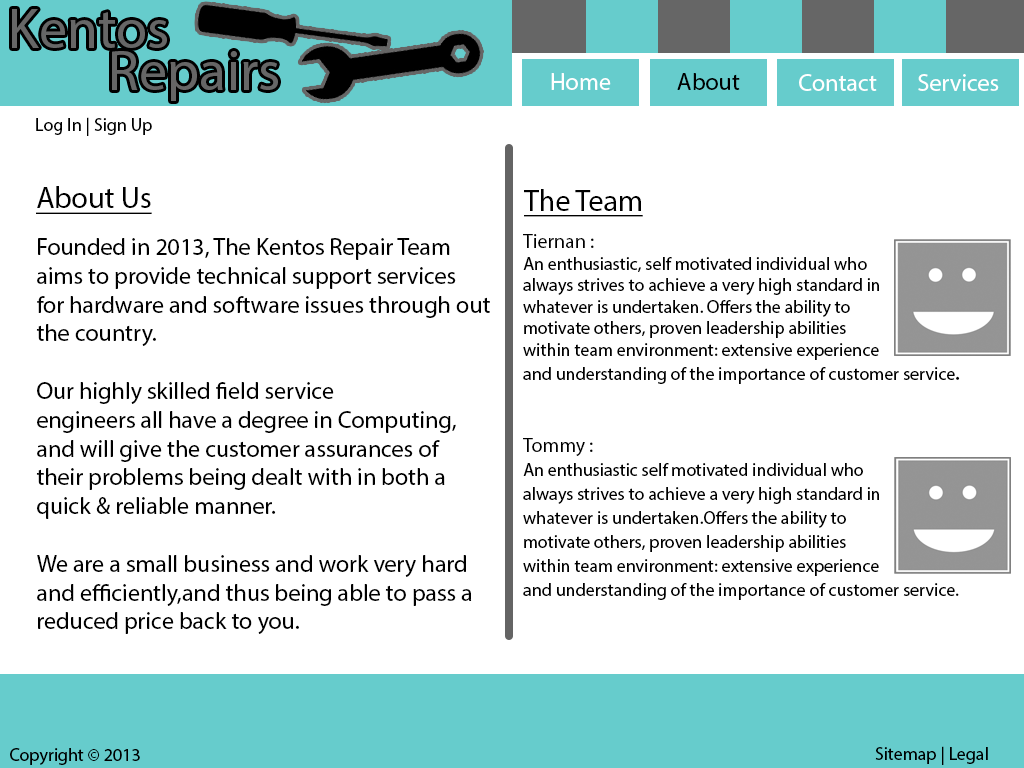
<style>
.page{position:relative;width:1024px;height:768px;background:#ffffff}
.page>*{position:absolute;margin:0}
.t1{font:24px "MyriadPro-Regular";color:#ffffff}
.t2{font:24px "MyriadPro-Regular";color:#000000}
.t3{font:18px "MyriadPro-Regular";color:#000000}
.t4{font:30px "MyriadPro-Regular";color:#000000;text-decoration:underline}
.t5{font:18px/24px "MyriadPro-Regular";color:#000000}
.t6{font:20px "MyriadPro-Regular";color:#000000}
.t7{font:24px/24px "MyriadPro-Regular";color:#000000}
.t8{font:20px/24px "MyriadPro-Regular";color:#000000}
</style>
<div class="page">
<p class="t1" style="left:551px;top:73px;width:60px;height:17px">Home</p>
<p class="t2" style="left:677px;top:73px;width:63px;height:17px">About</p>
<p class="t1" style="left:799px;top:74px;width:78px;height:17px">Contact</p>
<p class="t1" style="left:918px;top:74px;width:81px;height:17px">Services</p>
<p class="t3" style="left:36px;top:117px;width:116px;height:19px">Log In | Sign Up</p>
<p class="t4" style="left:36px;top:186px;width:116px;height:28px">About Us</p>
<p class="t4" style="left:524px;top:189px;width:119px;height:28px">The Team</p>
<p class="t2" style="left:36px;top:238px;width:454px;height:396px">Founded in 2013, The Kentos Repair Team <br>aims to provide technical support services <br>for hardware and software issues through out <br>the country.<br><br>Our highly skilled field service <br>engineers all have a degree in Computing, <br>and will give the customer assurances of <br>their problems being dealt with in both a<br>quick &amp; reliable manner.<br><br>We are a small business and work very hard <br>and efficiently,and thus being able to pass a <br>reduced price back to you.</p>
<p class="t5" style="left:523px;top:234px;width:437px;height:366px"><span class="t6">Tiernan :<br></span><span class="t3">An enthusiastic, self motivated individual who <br>always strives to achieve a very high standard in<br>whatever is undertaken. Offers the ability to <br>motivate others, proven leadership abilities <br>within team environment: extensive experience<br>and understanding of the importance </span>of customer service<span class="t7">.<br><br><br></span><span class="t8">Tommy :<br></span>An enthusiastic self motivated individual who<br>always strives to achieve a very high standard in<br>whatever is undertaken.Offers the ability to <br>motivate others, proven leadership abilities <br>within team environment: extensive experience <br>and understanding of the importance of customer service.</p>
<p class="t3" style="left:10px;top:748px;width:130px;height:17px">Copyright © 2013</p>
<p class="t3" style="left:875px;top:746px;width:113px;height:19px">Sitemap | Legal</p>
</div>
